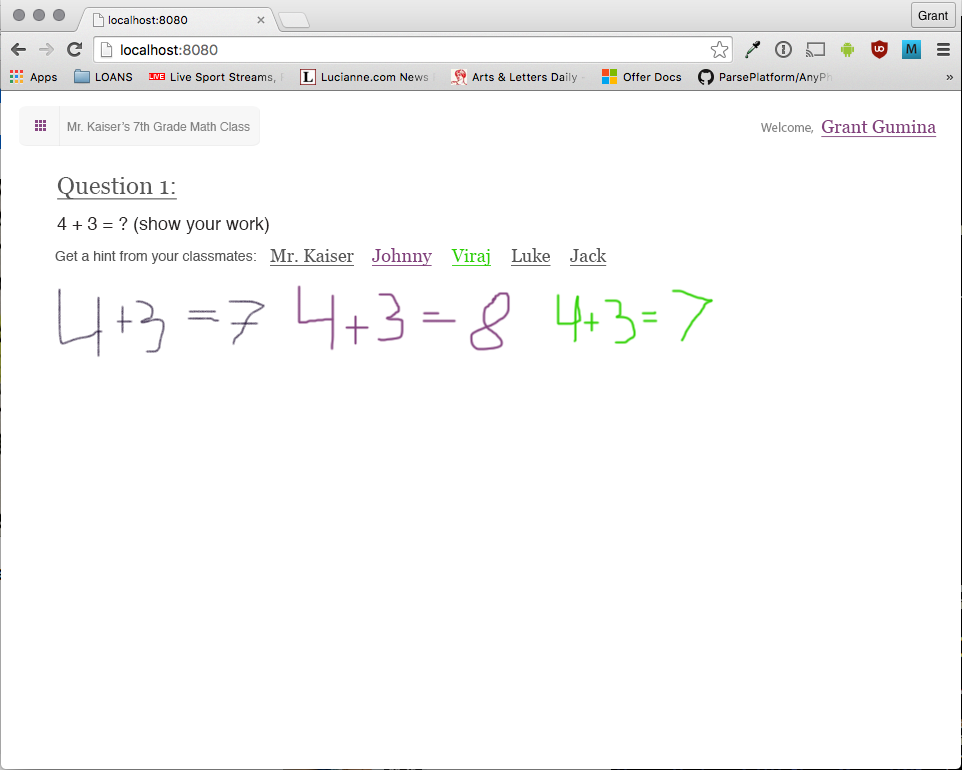
<style>
.page{position:relative;width:962px;height:770px;background:#ffffff}
.page>*{position:absolute;margin:0}
.t1{font:12px "Helvetica";color:#747474}
.t2{font:13px "MyriadPro-Regular";color:#747474}
.t3{font:18px "Georgia";color:#823f7d;text-decoration:underline}
.t4{font:24px "Georgia";color:#565656;text-decoration:underline}
.t5{font:18px "Helvetica";color:#2a2626}
.t6{font:14px "Helvetica";color:#565656}
.t7{font:18px "Georgia";color:#565656;text-decoration:underline}
.t8{font:18px "Georgia";color:#2dd101;text-decoration:underline}
</style>
<div class="page">
<p class="t1" style="left:67px;top:122px;width:183px;height:9px;opacity:0.9">Mr. Kaiser’s 7th Grade Math Class</p>
<p class="t2" style="left:761px;top:122px;width:53px;height:12px;opacity:0.9">Welcome,</p>
<p class="t3" style="left:821px;top:120px;width:116px;height:18px">Grant Gumina</p>
<p class="t4" style="left:57px;top:177px;width:120px;height:23px">Question 1:</p>
<p class="t5" style="left:57px;top:217px;width:212px;height:17px">4 + 3 = ? (show your work)</p>
<p class="t6" style="left:55px;top:251px;width:201px;height:13px">Get a hint from your classmates:</p>
<p class="t7" style="left:270px;top:249px;width:84px;height:17px">Mr. Kaiser</p>
<p class="t3" style="left:372px;top:248px;width:60px;height:18px">Johnny</p>
<p class="t8" style="left:451px;top:249px;width:40px;height:17px">Viraj</p>
<p class="t7" style="left:511px;top:248px;width:40px;height:18px">Luke</p>
<p class="t7" style="left:570px;top:248px;width:37px;height:18px">Jack</p>
</div>
